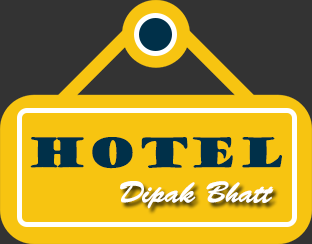
<style>
.page{position:relative;width:312px;height:244px;background:#f7c411}
.page>*{position:absolute;margin:0}
.t1{font:40px "GoudyStout";color:#003049}
.t2{font:30px "BrushScriptStd";color:#ffffff}
</style>
<div class="page">
<p class="t1" style="left:30px;top:137px;width:252px;height:32px">HOTEL</p>
<p class="t2" style="left:120px;top:181px;width:154px;height:28px">Dipak Bhatt</p>
</div>
